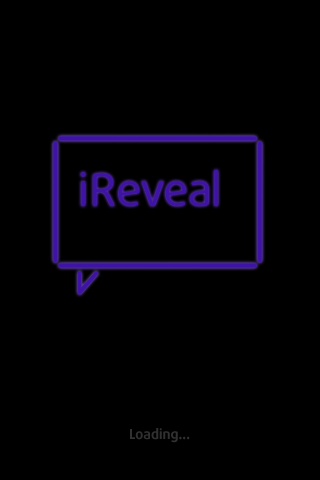
<style>
.page{position:relative;width:320px;height:480px;background:#000000}
.page>*{position:absolute;margin:0}
.t1{font:45.6px "DaxlinePro-Regular";color:#4013a7}
.t2{font:45.6px "DaxlinePro-Regular";letter-spacing:-0.05em;color:#4013a7}
.t3{font:45.6px "DaxlinePro-Regular";letter-spacing:-0.025em;color:#4013a7}
.t4{font:14px "DaxlinePro-Bold";color:#404040}
</style>
<div class="page">
<p class="t1" style="left:80px;top:170px;width:138px;height:36px">iRe<span class="t2">v</span>e<span class="t3">a</span>l</p>
<p class="t4" style="left:130px;top:428px;width:60px;height:15px;opacity:0.76">Loading...</p>
</div>
